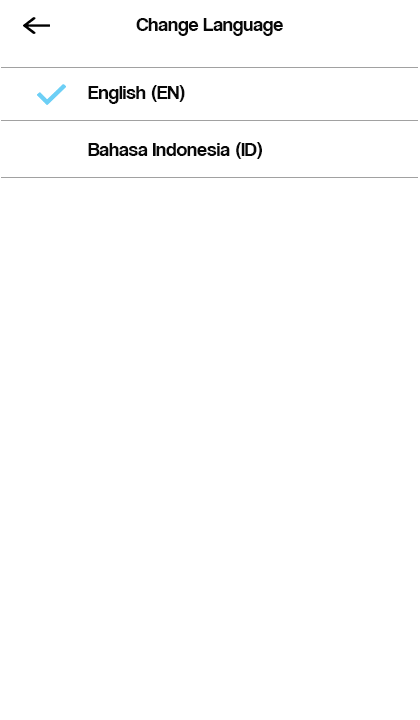
<style>
.page{position:relative;width:420px;height:720px;background:#ffffff}
.page>*{position:absolute;margin:0}
.t1{font:20px "CoolveticaRg-Regular";color:#080808}
</style>
<div class="page">
<p class="t1" style="left:136px;top:18px;width:147px;height:18px">Change Language</p>
<p class="t1" style="left:88px;top:85px;width:97px;height:19px">English (EN)</p>
<p class="t1" style="left:88px;top:142px;width:174px;height:17px">Bahasa Indonesia (ID)</p>
</div>
